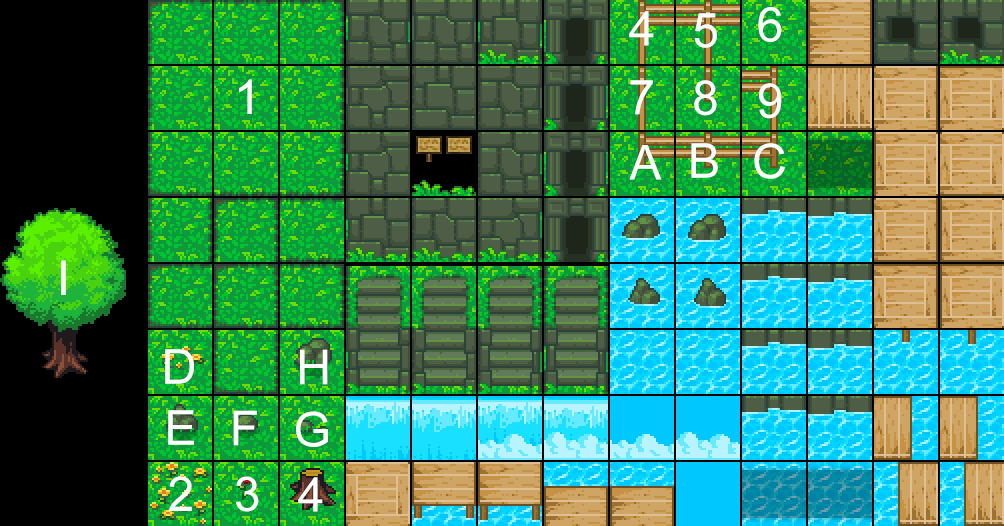
<style>
.page{position:relative;width:1004px;height:526px}
.page>*{position:absolute;margin:0}
.t1{font:48px "ArialMT";color:#ffffff;text-transform:uppercase}
</style>
<div class="page">
<p class="t1" style="left:629px;top:11px;width:25px;height:35px">4</p>
<p class="t1" style="left:694px;top:13px;width:23px;height:35px">5</p>
<p class="t1" style="left:758px;top:7px;width:24px;height:35px">6</p>
<p class="t1" style="left:239px;top:79px;width:13px;height:35px">1</p>
<p class="t1" style="left:630px;top:80px;width:23px;height:35px">7</p>
<p class="t1" style="left:694px;top:80px;width:23px;height:36px">8</p>
<p class="t1" style="left:759px;top:83px;width:23px;height:36px">9</p>
<p class="t1" style="left:629px;top:145px;width:33px;height:35px">A</p>
<p class="t1" style="left:691px;top:143px;width:27px;height:35px">B</p>
<p class="t1" style="left:754px;top:143px;width:31px;height:36px">C</p>
<p class="t1" style="left:61px;top:260px;width:5px;height:35px">I</p>
<p class="t1" style="left:165px;top:349px;width:29px;height:35px">D</p>
<p class="t1" style="left:300px;top:349px;width:28px;height:36px">H</p>
<p class="t1" style="left:168px;top:410px;width:26px;height:35px">E</p>
<p class="t1" style="left:233px;top:410px;width:24px;height:36px">F</p>
<p class="t1" style="left:296px;top:411px;width:32px;height:36px">G</p>
<p class="t1" style="left:169px;top:476px;width:23px;height:35px">2</p>
<p class="t1" style="left:236px;top:476px;width:23px;height:36px">3</p>
<p class="t1" style="left:298px;top:477px;width:25px;height:35px">4</p>
</div>
